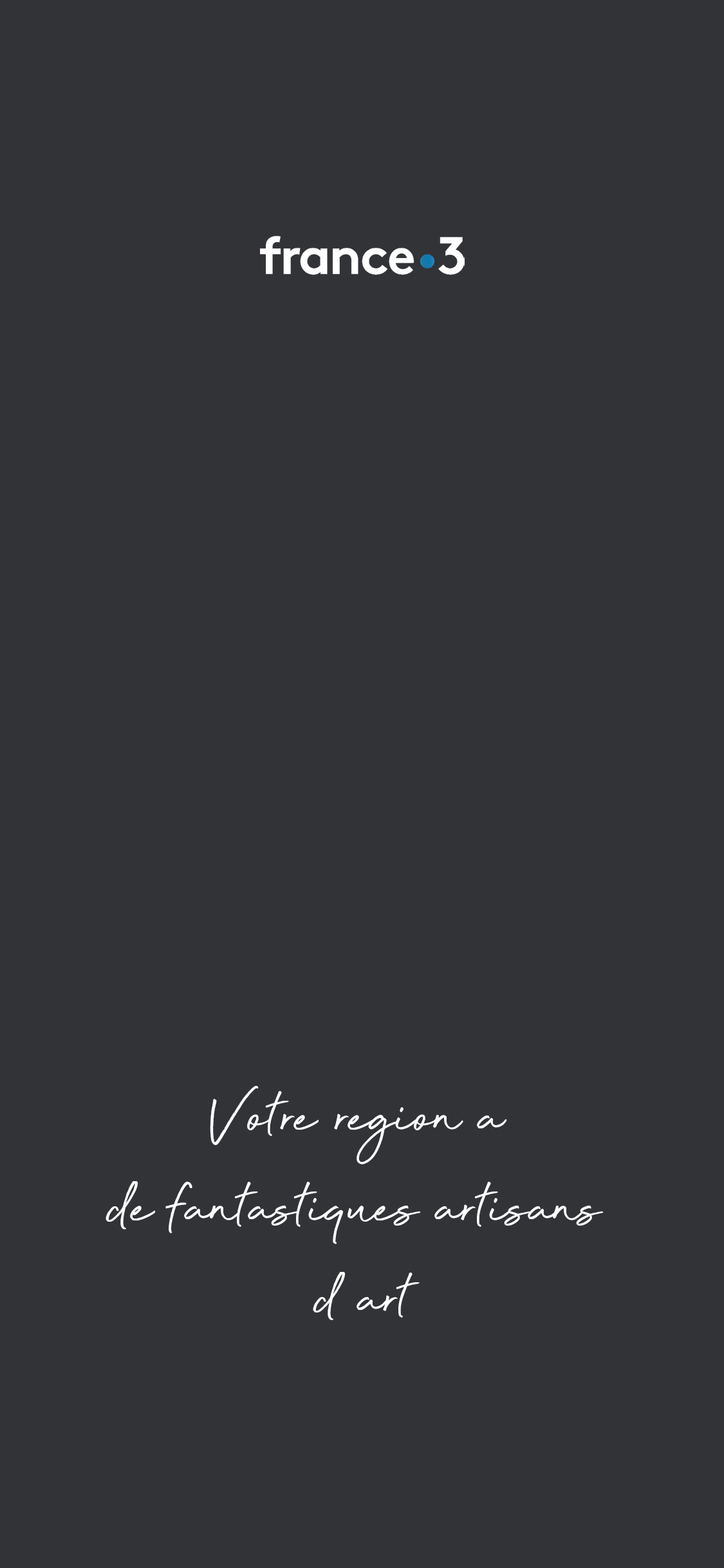
<style>
.page{position:relative;width:724px;height:1568px;background:#313337}
.page>*{position:absolute;margin:0}
.t1{font:75.5px "BeyondInfinity";color:#ffffff}
</style>
<div class="page">
<p class="t1" style="left:106px;top:1086px;width:498px;height:234px;text-align:center">Votre region a <br>de fantastiques artisans <br>d art</p>
</div>
